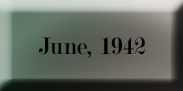
<style>
.page{position:relative;width:183px;height:91px}
.page>*{position:absolute;margin:0}
.t1{font:25.4px "Modern-Regular";color:#000000}
</style>
<div class="page">
<p class="t1" style="left:39px;top:37px;width:106px;height:22px">June, 1942</p>
</div>
